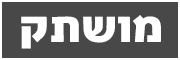
<style>
.page{position:relative;width:180px;height:60px;background:#484848}
.page>*{position:absolute;margin:0}
.t1{font:52.7px "FbAlbatros-Black";color:#ffffff}
</style>
<div class="page">
<p class="t1" style="left:21px;top:15px;width:140px;height:34px">מושתק</p>
</div>
